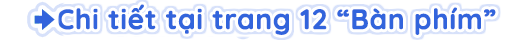
<style>
.page{position:relative;width:512px;height:41px;background:#ffffff}
.page>*{position:absolute;margin:0}
.t1{font:28px "Quicksand-Bold";color:#3264dc;font-weight:bold}
</style>
<div class="page">
<p class="t1" style="left:57px;top:4px;width:439px;height:31px">Chi tiết tại trang 12 “Bàn phím”</p>
</div>
